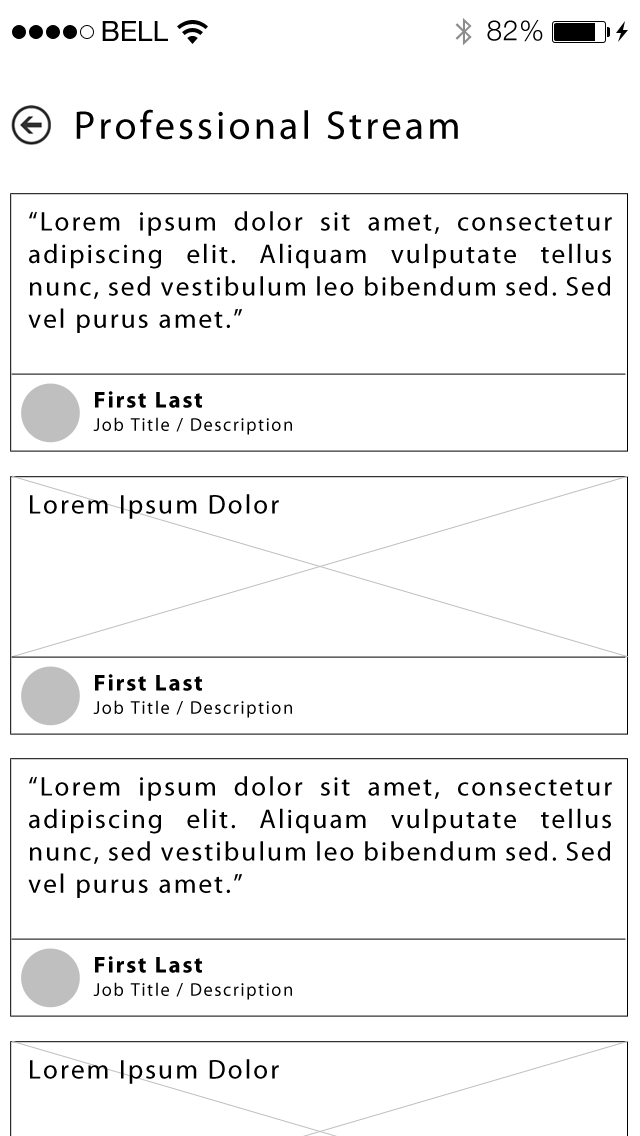
<style>
.page{position:relative;width:640px;height:1136px;background:#ffffff}
.page>*{position:absolute;margin:0}
.t1{font:28px "HelveticaNeue";color:#000000;text-transform:uppercase}
.t2{font:28px "HelveticaNeue-Light";letter-spacing:0.025em;color:#000000}
.t3{font:40px "MyriadPro-Regular";letter-spacing:0.08em;color:#000000}
.t4{font:27px "MyriadPro-Regular";letter-spacing:0.08em;color:#000000}
.t5{font:23px "MyriadPro-Bold";letter-spacing:0.08em;color:#000000}
.t6{font:18.4px "MyriadPro-Regular";letter-spacing:0.08em;color:#000000}
</style>
<div class="page">
<p class="t1" style="left:102px;top:21px;width:66px;height:20px">Bell</p>
<p class="t2" style="left:487px;top:20px;width:56px;height:22px">82%</p>
<p class="t3" style="left:76px;top:109px;width:382px;height:31px">Professional Stream</p>
<p class="t4" style="left:28px;top:211px;width:584px;height:122px;text-align:justify">“Lorem ipsum dolor sit amet, consectetur adipiscing elit. Aliquam vulputate tellus nunc, sed vestibulum leo bibendum sed. Sed vel purus amet.”</p>
<p class="t5" style="left:95px;top:391px;width:107px;height:17px">First Last</p>
<p class="t6" style="left:93px;top:417px;width:199px;height:18px">Job Title / Description</p>
<p class="t4" style="left:30px;top:494px;width:249px;height:25px">Lorem Ipsum Dolor</p>
<p class="t5" style="left:95px;top:674px;width:107px;height:17px">First Last</p>
<p class="t6" style="left:93px;top:700px;width:199px;height:18px">Job Title / Description</p>
<p class="t4" style="left:28px;top:776px;width:584px;height:122px;text-align:justify">“Lorem ipsum dolor sit amet, consectetur adipiscing elit. Aliquam vulputate tellus nunc, sed vestibulum leo bibendum sed. Sed vel purus amet.”</p>
<p class="t5" style="left:95px;top:956px;width:107px;height:17px">First Last</p>
<p class="t6" style="left:93px;top:982px;width:199px;height:18px">Job Title / Description</p>
<p class="t4" style="left:30px;top:1059px;width:249px;height:25px">Lorem Ipsum Dolor</p>
</div>
